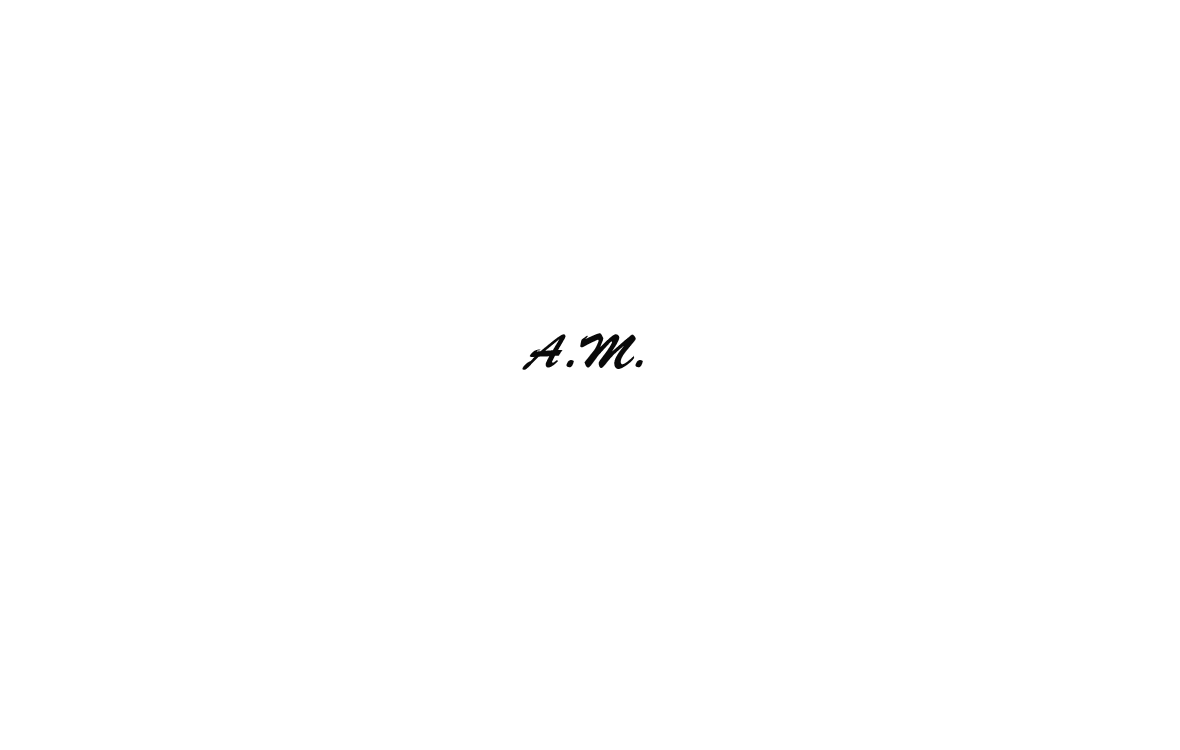
<style>
.page{position:relative;width:1180px;height:750px;background:#ffffff}
.page>*{position:absolute;margin:0}
.t1{font:48px "BrushScriptStd";color:#090909}
</style>
<div class="page">
<p class="t1" style="left:522px;top:333px;width:121px;height:37px">A.M.</p>
</div>
